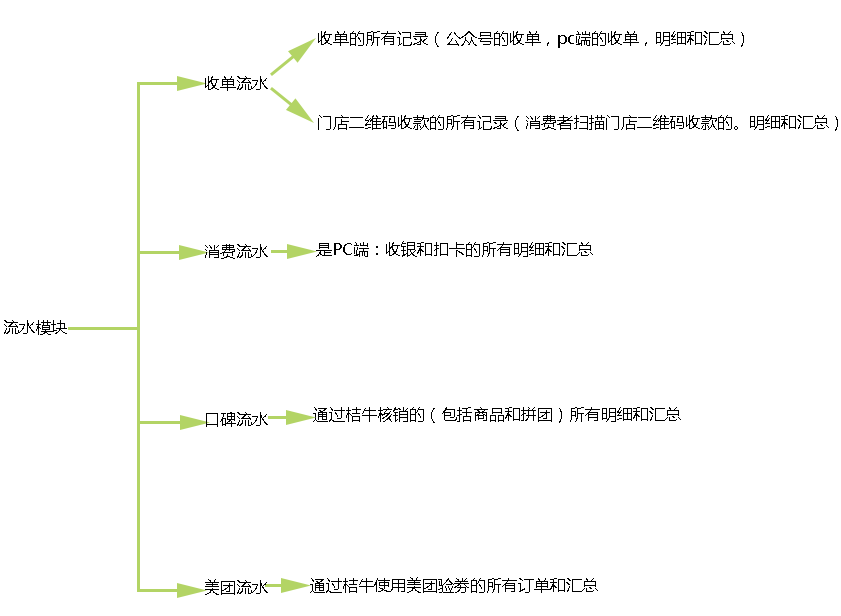
<style>
.page{position:relative;width:841px;height:616px;background:#ffffff}
.page>*{position:absolute;margin:0}
.t1{font:16px "MicrosoftYaHei";color:#000000}
</style>
<div class="page">
<p class="t1" style="left:318px;top:31px;width:520px;height:100px">收单的所有记录（公众号的收单，pc端的收单，明细和汇总）<br><br><br>门店二维码收款的所有记录（消费者扫描门店二维码收款的。明细和汇总）</p>
<p class="t1" style="left:205px;top:76px;width:63px;height:519px">收单流水<br><br><br><br><br><br>消费流水<br><br><br><br><br><br>口碑流水<br><br><br><br><br><br>美团流水</p>
<p class="t1" style="left:316px;top:241px;width:277px;height:16px">是PC端：收银和扣卡的所有明细和汇总</p>
<p class="t1" style="left:4px;top:320px;width:63px;height:15px">流水模块</p>
<p class="t1" style="left:313px;top:407px;width:368px;height:16px">通过桔牛核销的（包括商品和拼团）所有明细和汇总</p>
<p class="t1" style="left:310px;top:577px;width:288px;height:16px">通过桔牛使用美团验劵的所有订单和汇总</p>
</div>
